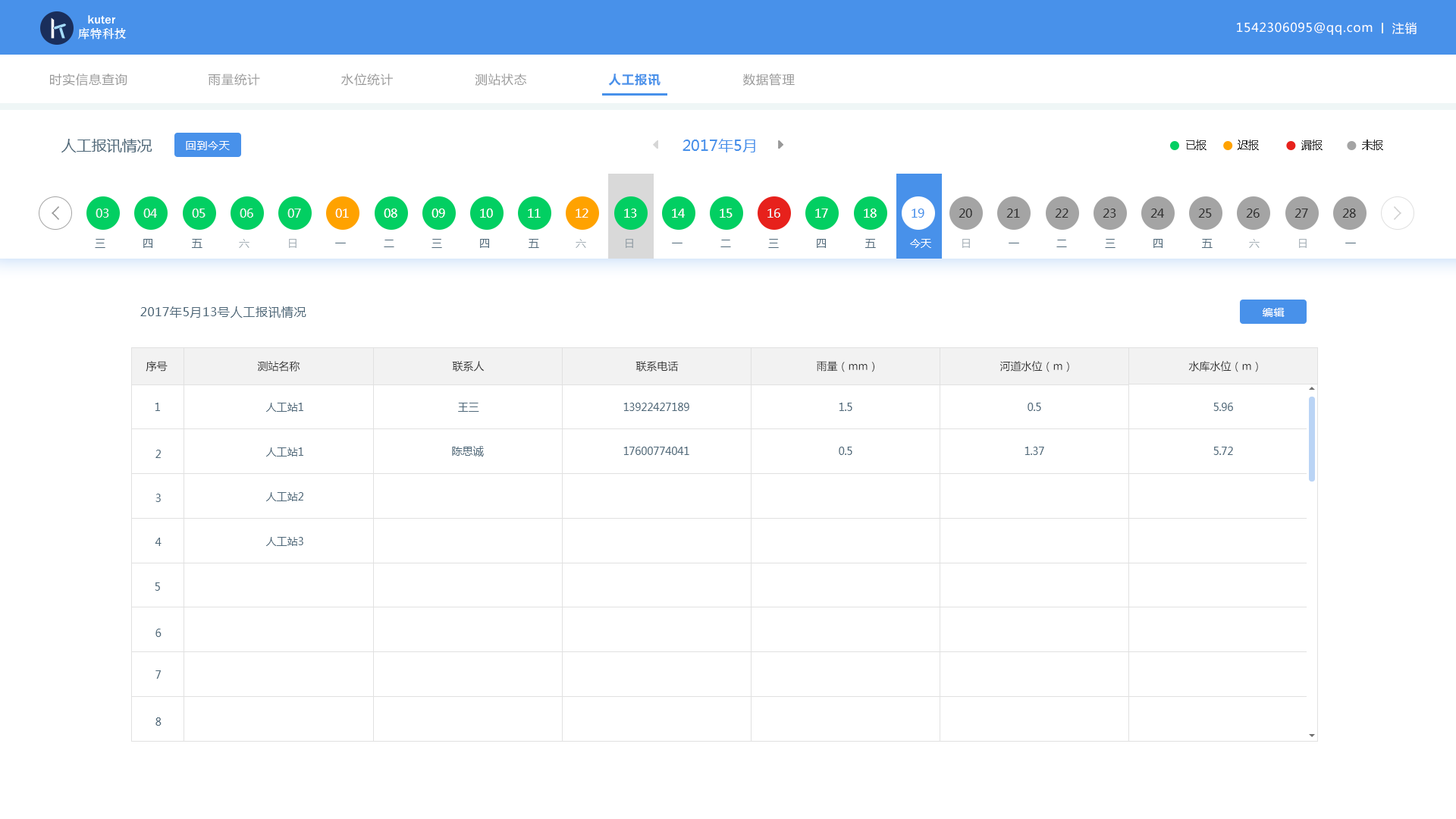
<style>
.page{position:relative;width:1456px;height:819px;background:#ffffff}
.page>*{position:absolute;margin:0}
.t1{font:12.1px "MicrosoftYaHei";letter-spacing:0.05em;color:#ffffff}
.t2{font:12.1px "MicrosoftYaHei";letter-spacing:0.05em;color:#999999}
.t3{font:12.1px "MicrosoftYaHei-Bold";letter-spacing:0.05em;color:#4891ea}
.t4{font:15.2px "MicrosoftYaHei";color:#50697a}
.t5{font:10.6px "MicrosoftYaHei";letter-spacing:0.05em;color:#ffffff}
.t6{font:15.2px "MicrosoftYaHei";color:#4891ea}
.t7{font:10.6px "MicrosoftYaHei";color:#333333}
.t8{font:12.1px "MicrosoftYaHei";color:#eff6f6}
.t9{font:12.1px "MicrosoftYaHei";color:#ffffff}
.t10{font:12.1px "MicrosoftYaHei";color:#4891ea}
.t11{font:12.1px "MicrosoftYaHei";color:#333333}
.t12{font:10.6px "MicrosoftYaHei";color:#50697a}
.t13{font:10.6px "MicrosoftYaHei";color:#a4afb6}
.t14{font:10.6px "MicrosoftYaHei";color:#909ca4}
.t15{font:10.6px "MicrosoftYaHei";color:#ffffff}
.t16{font:12.1px "MicrosoftYaHei";letter-spacing:0.05em;color:#50697a}
</style>
<div class="page">
<p class="t1" style="left:1237px;top:22px;width:136px;height:13px">1542306095@qq.com</p>
<p class="t1" style="left:1392px;top:22px;width:25px;height:12px">注销</p>
<p class="t2" style="left:50px;top:74px;width:77px;height:12px">时实信息查询</p>
<p class="t2" style="left:208px;top:74px;width:52px;height:12px">雨量统计</p>
<p class="t2" style="left:341px;top:74px;width:52px;height:12px">水位统计</p>
<p class="t2" style="left:475px;top:74px;width:52px;height:12px">测站状态</p>
<p class="t3" style="left:608px;top:74px;width:52px;height:12px">人工报讯</p>
<p class="t2" style="left:742px;top:74px;width:53px;height:12px">数据管理</p>
<p class="t4" style="left:61px;top:139px;width:91px;height:13px">人工报讯情况</p>
<p class="t5" style="left:186px;top:141px;width:44px;height:9px">回到今天</p>
<p class="t6" style="left:682px;top:139px;width:73px;height:13px">2017年5月</p>
<p class="t7" style="left:1186px;top:140px;width:20px;height:10px">已报</p>
<p class="t7" style="left:1238px;top:140px;width:21px;height:10px">迟报</p>
<p class="t7" style="left:1301px;top:140px;width:22px;height:10px">漏报</p>
<p class="t7" style="left:1362px;top:140px;width:21px;height:10px">未报</p>
<p class="t8" style="left:96px;top:209px;width:13px;height:9px">03</p>
<p class="t8" style="left:143px;top:209px;width:14px;height:9px">04</p>
<p class="t8" style="left:192px;top:209px;width:14px;height:9px">05</p>
<p class="t8" style="left:240px;top:209px;width:13px;height:9px">06</p>
<p class="t8" style="left:287px;top:209px;width:14px;height:9px">07</p>
<p class="t9" style="left:335px;top:209px;width:14px;height:9px">01</p>
<p class="t9" style="left:384px;top:209px;width:13px;height:9px">08</p>
<p class="t9" style="left:431px;top:209px;width:14px;height:9px">09</p>
<p class="t9" style="left:480px;top:209px;width:13px;height:9px">10</p>
<p class="t9" style="left:528px;top:209px;width:13px;height:9px">11</p>
<p class="t9" style="left:576px;top:209px;width:12px;height:9px">12</p>
<p class="t9" style="left:624px;top:209px;width:13px;height:9px">13</p>
<p class="t9" style="left:672px;top:209px;width:13px;height:9px">14</p>
<p class="t9" style="left:720px;top:209px;width:13px;height:9px">15</p>
<p class="t8" style="left:767px;top:209px;width:13px;height:9px">16</p>
<p class="t9" style="left:815px;top:209px;width:13px;height:9px">17</p>
<p class="t9" style="left:864px;top:209px;width:13px;height:9px">18</p>
<p class="t10" style="left:912px;top:209px;width:12px;height:9px">19</p>
<p class="t11" style="left:959px;top:209px;width:13px;height:9px">20</p>
<p class="t11" style="left:1006px;top:209px;width:14px;height:9px">21</p>
<p class="t11" style="left:1055px;top:209px;width:13px;height:9px">22</p>
<p class="t11" style="left:1103px;top:209px;width:13px;height:9px">23</p>
<p class="t11" style="left:1150px;top:209px;width:14px;height:9px">24</p>
<p class="t11" style="left:1198px;top:209px;width:14px;height:9px">25</p>
<p class="t11" style="left:1246px;top:209px;width:14px;height:9px">26</p>
<p class="t11" style="left:1294px;top:209px;width:14px;height:9px">27</p>
<p class="t11" style="left:1342px;top:209px;width:14px;height:9px">28</p>
<p class="t12" style="left:95px;top:239px;width:10px;height:9px">三</p>
<p class="t12" style="left:143px;top:239px;width:9px;height:9px">四</p>
<p class="t12" style="left:192px;top:239px;width:10px;height:9px">五</p>
<p class="t13" style="left:239px;top:239px;width:10px;height:9px">六</p>
<p class="t13" style="left:289px;top:239px;width:8px;height:9px">日</p>
<p class="t12" style="left:335px;top:243px;width:11px;height:0px">一</p>
<p class="t12" style="left:384px;top:240px;width:10px;height:7px">二</p>
<p class="t12" style="left:431px;top:239px;width:11px;height:9px">三</p>
<p class="t12" style="left:480px;top:239px;width:9px;height:9px">四</p>
<p class="t12" style="left:529px;top:239px;width:10px;height:9px">五</p>
<p class="t13" style="left:576px;top:239px;width:10px;height:9px">六</p>
<p class="t14" style="left:626px;top:239px;width:7px;height:9px">日</p>
<p class="t12" style="left:672px;top:243px;width:10px;height:0px">一</p>
<p class="t12" style="left:720px;top:240px;width:11px;height:7px">二</p>
<p class="t12" style="left:768px;top:239px;width:11px;height:9px">三</p>
<p class="t12" style="left:817px;top:239px;width:9px;height:9px">四</p>
<p class="t12" style="left:865px;top:239px;width:11px;height:9px">五</p>
<p class="t15" style="left:910px;top:239px;width:21px;height:9px">今天</p>
<p class="t13" style="left:962px;top:239px;width:8px;height:9px">日</p>
<p class="t12" style="left:1009px;top:243px;width:10px;height:0px">一</p>
<p class="t12" style="left:1056px;top:240px;width:11px;height:7px">二</p>
<p class="t12" style="left:1105px;top:239px;width:10px;height:9px">三</p>
<p class="t12" style="left:1153px;top:239px;width:10px;height:9px">四</p>
<p class="t12" style="left:1202px;top:239px;width:11px;height:9px">五</p>
<p class="t13" style="left:1249px;top:239px;width:11px;height:9px">六</p>
<p class="t13" style="left:1299px;top:239px;width:8px;height:9px">日</p>
<p class="t12" style="left:1345px;top:243px;width:11px;height:0px">一</p>
<p class="t16" style="left:140px;top:306px;width:166px;height:12px">2017年5月13号人工报讯情况</p>
<p class="t5" style="left:1263px;top:308px;width:22px;height:9px">编辑</p>
<p class="t7" style="left:146px;top:361px;width:22px;height:11px">序号</p>
<p class="t7" style="left:257px;top:361px;width:43px;height:11px">测站名称</p>
<p class="t7" style="left:452px;top:361px;width:33px;height:11px">联系人</p>
<p class="t7" style="left:635px;top:361px;width:44px;height:11px">联系电话</p>
<p class="t7" style="left:817px;top:361px;width:57px;height:11px">雨量（mm）</p>
<p class="t7" style="left:999px;top:361px;width:70px;height:11px">河道水位（m）</p>
<p class="t7" style="left:1188px;top:361px;width:70px;height:11px">水库水位（m）</p>
<p class="t12" style="left:155px;top:403px;width:5px;height:8px">1</p>
<p class="t12" style="left:266px;top:403px;width:37px;height:9px">人工站1</p>
<p class="t12" style="left:458px;top:403px;width:21px;height:9px">王三</p>
<p class="t12" style="left:623px;top:403px;width:66px;height:8px">13922427189</p>
<p class="t12" style="left:839px;top:403px;width:13px;height:8px">1.5</p>
<p class="t12" style="left:1028px;top:403px;width:13px;height:8px">0.5</p>
<p class="t12" style="left:1213px;top:403px;width:20px;height:8px">5.96</p>
<p class="t12" style="left:155px;top:450px;width:6px;height:8px">2</p>
<p class="t12" style="left:266px;top:447px;width:37px;height:10px">人工站1</p>
<p class="t12" style="left:452px;top:446px;width:32px;height:11px">陈思诚</p>
<p class="t12" style="left:623px;top:447px;width:66px;height:8px">17600774041</p>
<p class="t12" style="left:839px;top:447px;width:13px;height:8px">0.5</p>
<p class="t12" style="left:1024px;top:447px;width:20px;height:8px">1.37</p>
<p class="t12" style="left:1213px;top:447px;width:20px;height:8px">5.72</p>
<p class="t12" style="left:155px;top:494px;width:6px;height:8px">3</p>
<p class="t12" style="left:266px;top:492px;width:37px;height:9px">人工站2</p>
<p class="t12" style="left:155px;top:538px;width:7px;height:8px">4</p>
<p class="t12" style="left:266px;top:537px;width:37px;height:9px">人工站3</p>
<p class="t12" style="left:155px;top:582px;width:5px;height:9px">5</p>
<p class="t12" style="left:155px;top:629px;width:7px;height:8px">6</p>
<p class="t12" style="left:155px;top:670px;width:6px;height:9px">7</p>
<p class="t12" style="left:155px;top:717px;width:7px;height:9px">8</p>
</div>
